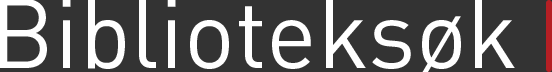
<style>
.page{position:relative;width:552px;height:72px;background:#333333}
.page>*{position:absolute;margin:0}
.t1{font:96px "DIN-Regular";color:#ffffff}
</style>
<div class="page">
<p class="t1" style="left:0px;top:0px;width:515px;height:73px">Biblioteksøk</p>
</div>
